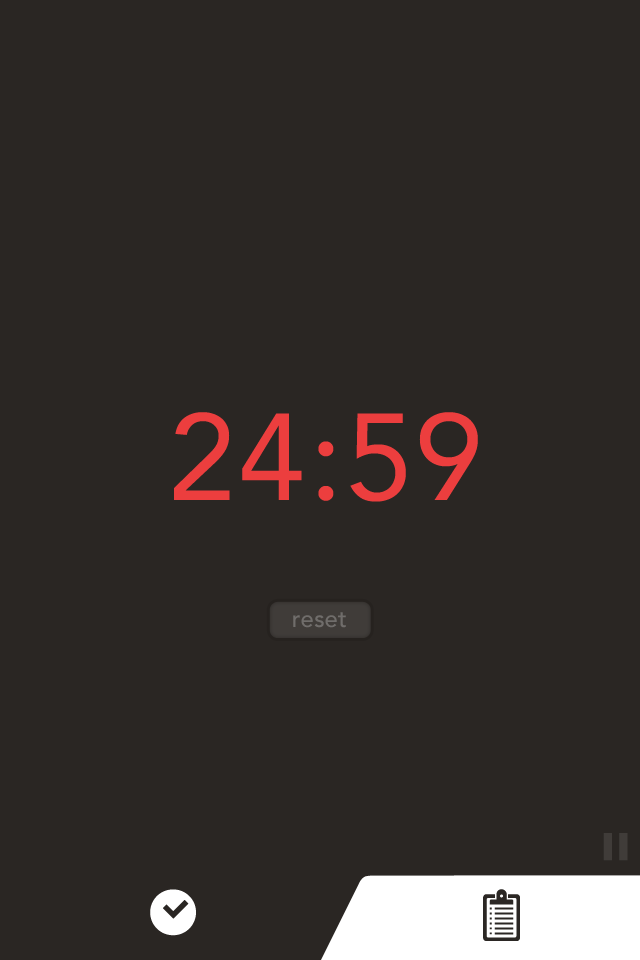
<style>
.page{position:relative;width:640px;height:960px;background:#2a2623}
.page>*{position:absolute;margin:0}
.t1{font:122px "Avenir-Roman";letter-spacing:0.02em;color:#ec3e3e}
.t2{font:24px "Avenir-Medium";color:#706d6b}
</style>
<div class="page">
<p class="t1" style="left:174px;top:412px;width:304px;height:90px">24:59</p>
<p class="t2" style="left:293px;top:612px;width:53px;height:16px">reset</p>
</div>
